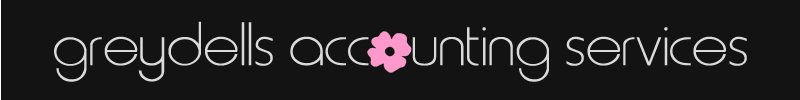
<style>
.page{position:relative;width:800px;height:100px;background:#131313}
.page>*{position:absolute;margin:0}
.t1{font:72px "MetroNormal";color:#dadada}
</style>
<div class="page">
<p class="t1" style="left:54px;top:21px;width:693px;height:61px">greydells acc   unting services</p>
</div>
